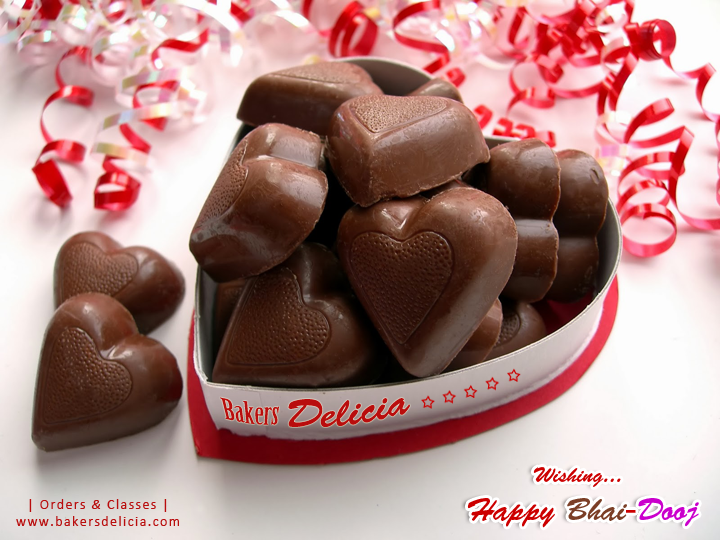
<style>
.page{position:relative;width:720px;height:540px}
.page>*{position:absolute;margin:0}
.t1{font:30.6px "BirchStd";color:#b90d0d}
.t2{font:39.9px "BrushScriptStd";color:#b90d0d}
.t3{font:21.7px "BrushScriptStd";color:#cc0000}
.t4{font:31.7px "BrushScriptStd";color:#cc0000}
.t5{font:31.7px "BrushScriptStd";color:#7b3e26}
.t6{font:31.7px "BrushScriptStd";color:#ca00cc}
.t7{font:14px "Calibri";letter-spacing:0.1em;color:#b90d0d}
.t8{font:14px "Calibri-Italic";letter-spacing:0.1em;color:#b90d0d}
</style>
<div class="page">
<p class="t1" style="left:220px;top:397px;width:59px;height:28px;rotate:5deg">Bakers</p>
<p class="t2" style="left:288px;top:398px;width:122px;height:29px;rotate:-7deg">Delicia</p>
<p class="t3" style="left:467px;top:467px;width:232px;height:61px;text-align:center">Wishing... <br><span class="t4">Happy </span><span class="t5">Bhai</span><span class="t4">-</span><span class="t6">Dooj</span></p>
<p class="t7" style="left:29px;top:499px;width:138px;height:13px">| Orders <span class="t8">&amp;</span> Classes |</p>
<p class="t7" style="left:16px;top:516px;width:163px;height:10px">www.bakersdelicia.com</p>
</div>
